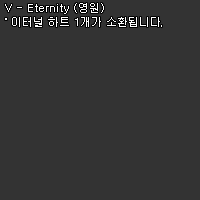
<style>
.page{position:relative;width:200px;height:200px;background:#333333}
.page>*{position:absolute;margin:0}
.t1{font:11px/14px "Dotum";color:#ffffff}
</style>
<div class="page">
<p class="t1" style="left:5px;top:3px;width:157px;height:24px">V - Eternity (영원)<br>˚ 이터널 하트 1개가 소환됩니다.</p>
</div>
